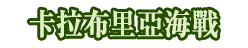
<style>
.page{position:relative;width:248px;height:48px;background:#ffffff}
.page>*{position:absolute;margin:0}
.t1{font:30px "RyuminPr6N-ExBold";color:#e1f1c3;font-weight:bold;scale:0.9 1}
</style>
<div class="page">
<p class="t1" style="left:29px;top:9px;width:189px;height:29px">卡拉布里亞海戰</p>
</div>
